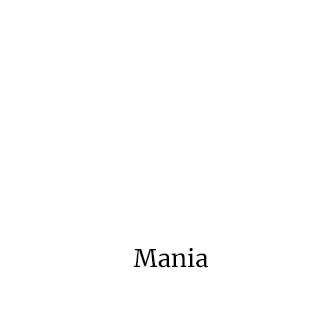
<style>
.page{position:relative;width:328px;height:327px;background:#ffffff}
.page>*{position:absolute;margin:0}
.t1{font:24px "Merriweather-Regular";color:#000000}
</style>
<div class="page">
<p class="t1" style="left:133px;top:248px;width:75px;height:20px">Mania</p>
</div>
